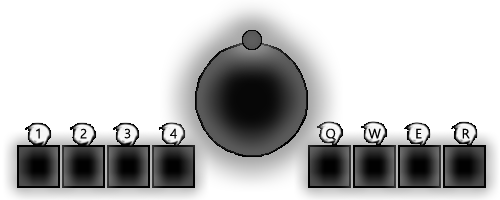
<style>
.page{position:relative;width:500px;height:200px;background:#ffffff}
.page>*{position:absolute;margin:0}
.t1{font:13px "MalgunGothic";color:#000000}
</style>
<div class="page">
<p class="t1" style="left:36px;top:128px;width:4px;height:11px">1</p>
<p class="t1" style="left:80px;top:128px;width:7px;height:11px">2</p>
<p class="t1" style="left:124px;top:128px;width:7px;height:11px">3</p>
<p class="t1" style="left:170px;top:128px;width:7px;height:11px">4</p>
<p class="t1" style="left:326px;top:128px;width:10px;height:12px">Q</p>
<p class="t1" style="left:368px;top:128px;width:13px;height:11px">W</p>
<p class="t1" style="left:416px;top:128px;width:6px;height:11px">E</p>
<p class="t1" style="left:462px;top:128px;width:8px;height:11px">R</p>
</div>
